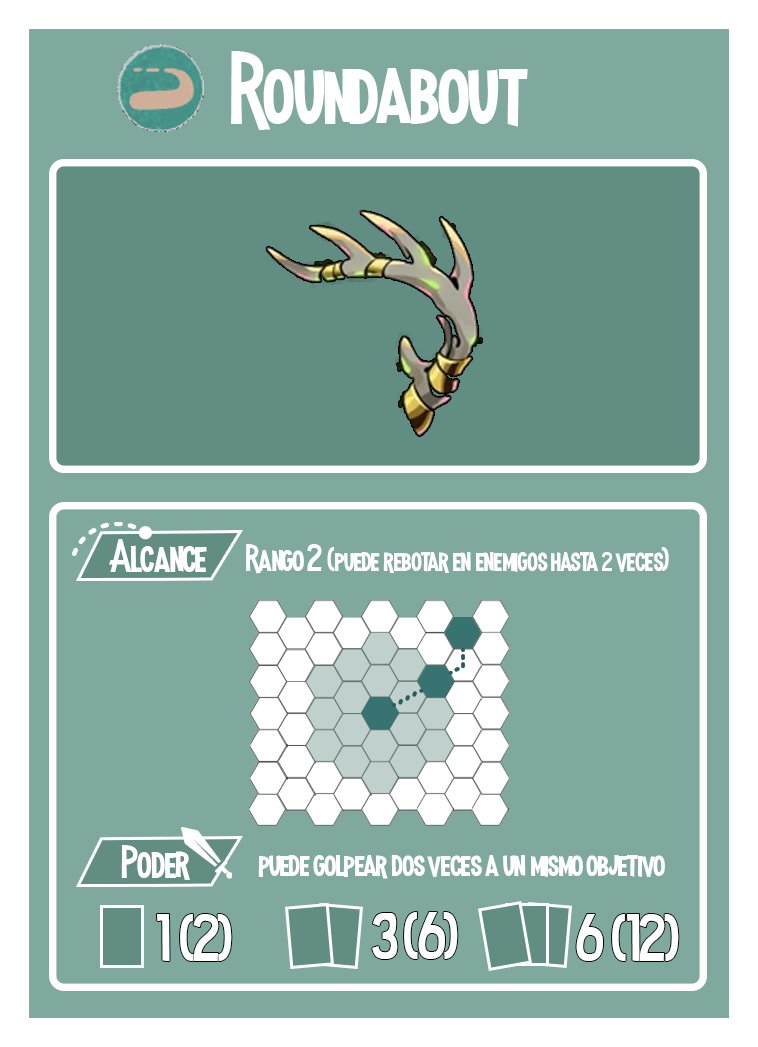
<style>
.page{position:relative;width:758px;height:1047px;background:#7fa99f}
.page>*{position:absolute;margin:0}
.t1{font:100px "MadnessHyperactive";color:#ffffff}
.t2{font:45.8px "MadnessHyperactive";color:#ffffff}
.t3{font:33.3px "MadnessHyperactive";color:#ffffff}
.t4{font:37.5px "MadnessHyperactive";color:#ffffff}
.t5{font:27.1px "MadnessHyperactive";color:#ffffff}
.t6{font:66.3px "MadnessHyperactive";color:#ffffff}
</style>
<div class="page">
<p class="t1" style="left:231px;top:51px;width:297px;height:79px">Roundabout</p>
<p class="t2" style="left:109px;top:539px;width:98px;height:33px">Alcance</p>
<p class="t3" style="left:246px;top:544px;width:423px;height:30px"><span class="t4">Rango 2 </span>(puede rebotar en enemigos hasta <span class="t5">2</span> veces)</p>
<p class="t2" style="left:121px;top:845px;width:69px;height:35px">Poder</p>
<p class="t4" style="left:258px;top:854px;width:407px;height:25px">puede golpear dos veces a un mismo objetivo</p>
<p class="t6" style="left:156px;top:914px;width:76px;height:48px">1 (2)</p>
<p class="t6" style="left:372px;top:912px;width:86px;height:47px">3 (6)</p>
<p class="t6" style="left:576px;top:914px;width:103px;height:48px">6 (12)</p>
</div>
